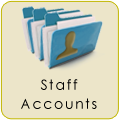
<style>
.page{position:relative;width:120px;height:120px;background:#ece5c9}
.page>*{position:absolute;margin:0}
.t1{font:14px/19px "CenturyGothic";letter-spacing:0.121em;color:#000000}
</style>
<div class="page">
<p class="t1" style="left:21px;top:79px;width:76px;height:30px;text-align:center">Staff<br>Accounts</p>
</div>
